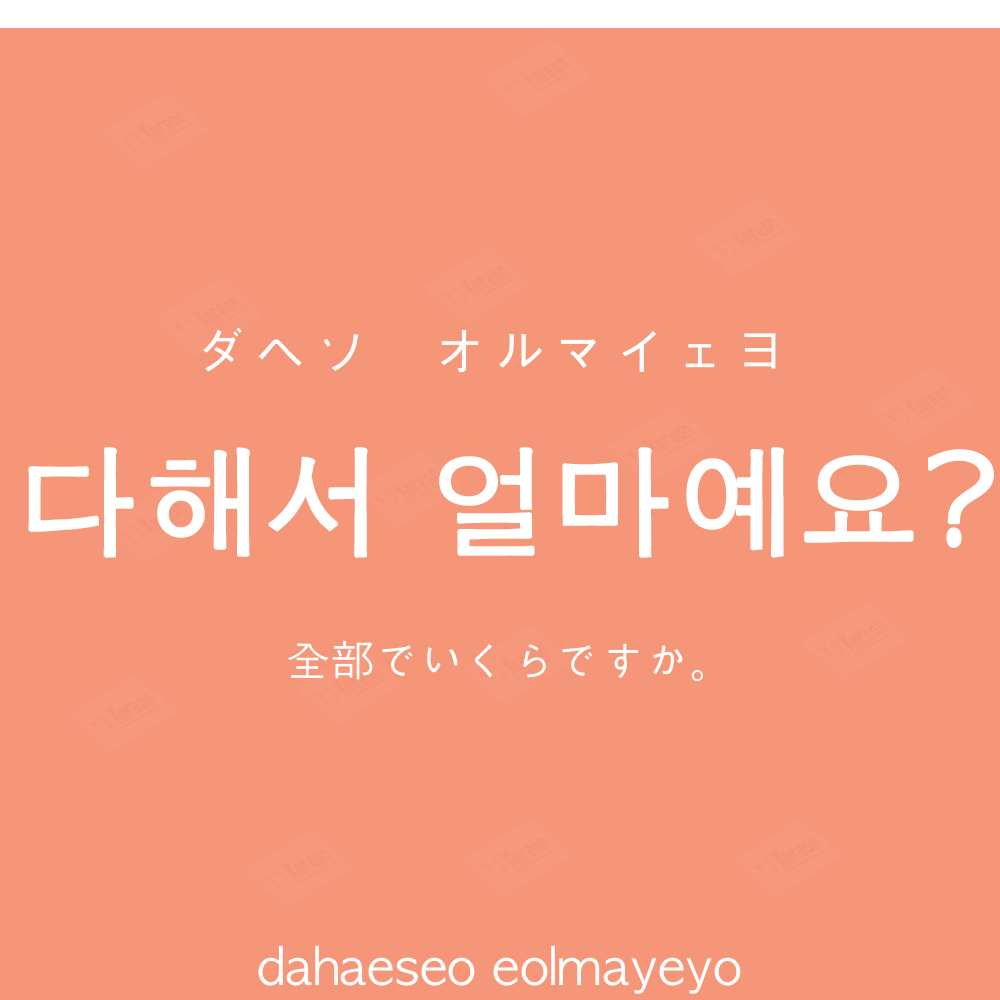
<style>
.page{position:relative;width:1000px;height:1000px;background:#f69679}
.page>*{position:absolute;margin:0}
.t1{font:60px "AppleGothic";color:#ffffff}
.t2{font:120px "AppleGothic";color:#ffffff;font-weight:bold}
.t3{font:45px "AppleGothic";color:#ffffff}
.t4{font:50px "AppleGothic";color:#ffffff}
</style>
<div class="page">
<p class="t1" style="left:203px;top:327px;width:573px;height:46px">ダヘソ　オルマイェヨ</p>
<p class="t2" style="left:28px;top:447px;width:966px;height:111px">다해서 얼마예요?</p>
<p class="t3" style="left:287px;top:640px;width:416px;height:42px">全部でいくらですか。</p>
<p class="t4" style="left:258px;top:945px;width:483px;height:49px">dahaeseo eolmayeyo</p>
</div>
